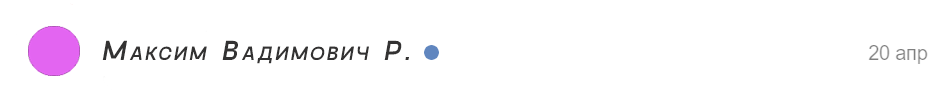
<style>
.page{position:relative;width:944px;height:101px;background:#ffffff}
.page>*{position:absolute;margin:0}
.t1{font:28px "GoshaSans-Regular";letter-spacing:0.12em;color:#333232;font-variant:small-caps;font-style:italic}
</style>
<div class="page">
<p class="t1" style="left:102px;top:40px;width:307px;height:24px">Максим Вадимович Р.</p>
</div>
